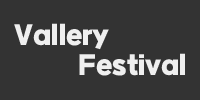
<style>
.page{position:relative;width:200px;height:100px;background:#333333}
.page>*{position:absolute;margin:0}
.t1{font:28px "GangwonEduPowerExtraBold";color:#efefef}
</style>
<div class="page">
<p class="t1" style="left:14px;top:23px;width:95px;height:27px">Vallery</p>
<p class="t1" style="left:79px;top:53px;width:106px;height:23px">Festival</p>
</div>
